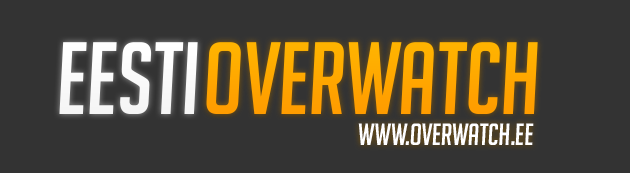
<style>
.page{position:relative;width:630px;height:173px;background:#333333}
.page>*{position:absolute;margin:0}
.t1{font:100px "BigNoodleTitling-Oblique";color:#ffffff}
.t2{font:100px "BigNoodleTitling-Oblique";color:#ffb300}
.t3{font:30px "BigNoodleTitling-Oblique";color:#ffffff}
</style>
<div class="page">
<p class="t1" style="left:59px;top:42px;width:139px;height:72px">EESTI</p>
<p class="t2" style="left:206px;top:42px;width:332px;height:72px">OVERWATCH</p>
<p class="t3" style="left:358px;top:123px;width:176px;height:22px">www.overwatch.ee</p>
</div>
